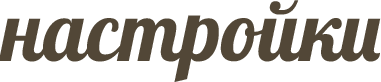
<style>
.page{position:relative;width:381px;height:82px;background:#ffffff}
.page>*{position:absolute;margin:0}
.t1{font:84.5px "Lobster";color:#524838}
</style>
<div class="page">
<p class="t1" style="left:0px;top:0px;width:381px;height:82px">настройки</p>
</div>
